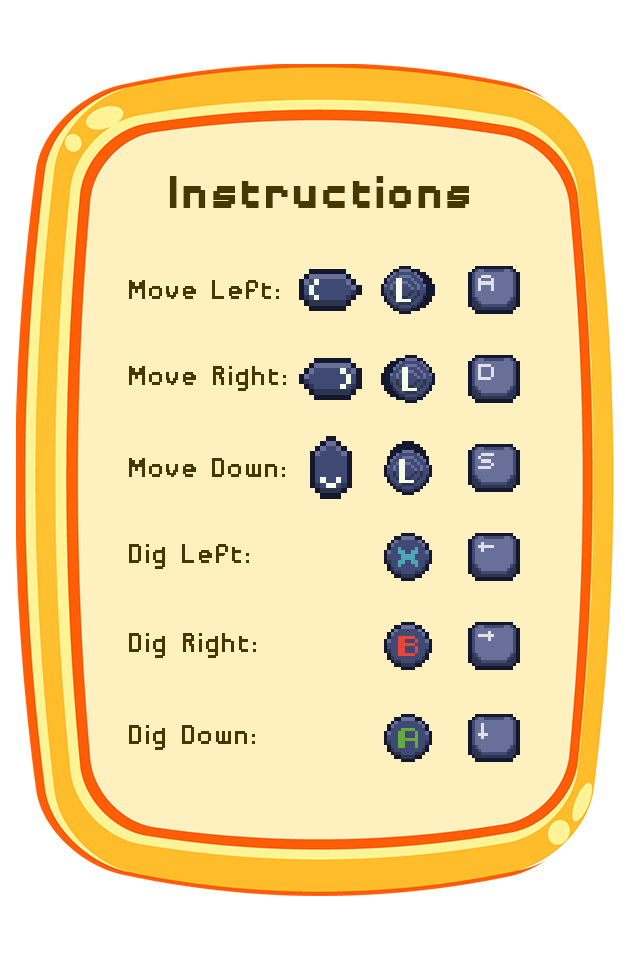
<style>
.page{position:relative;width:640px;height:960px;background:#fff0bf}
.page>*{position:absolute;margin:0}
.t1{font:60px "DisposableDroidBB-Bold";color:#453802}
.t2{font:36px "DisposableDroidBB-Bold";color:#453802}
</style>
<div class="page">
<p class="t1" style="left:169px;top:176px;width:300px;height:32px">Instructions</p>
<p class="t2" style="left:129px;top:280px;width:150px;height:19px">Move Left:</p>
<p class="t2" style="left:129px;top:366px;width:157px;height:25px">Move Right:</p>
<p class="t2" style="left:129px;top:458px;width:156px;height:19px">Move Down:</p>
<p class="t2" style="left:129px;top:544px;width:120px;height:25px">Dig Left:</p>
<p class="t2" style="left:129px;top:633px;width:127px;height:25px">Dig Right:</p>
<p class="t2" style="left:129px;top:725px;width:126px;height:25px">Dig Down:</p>
</div>
